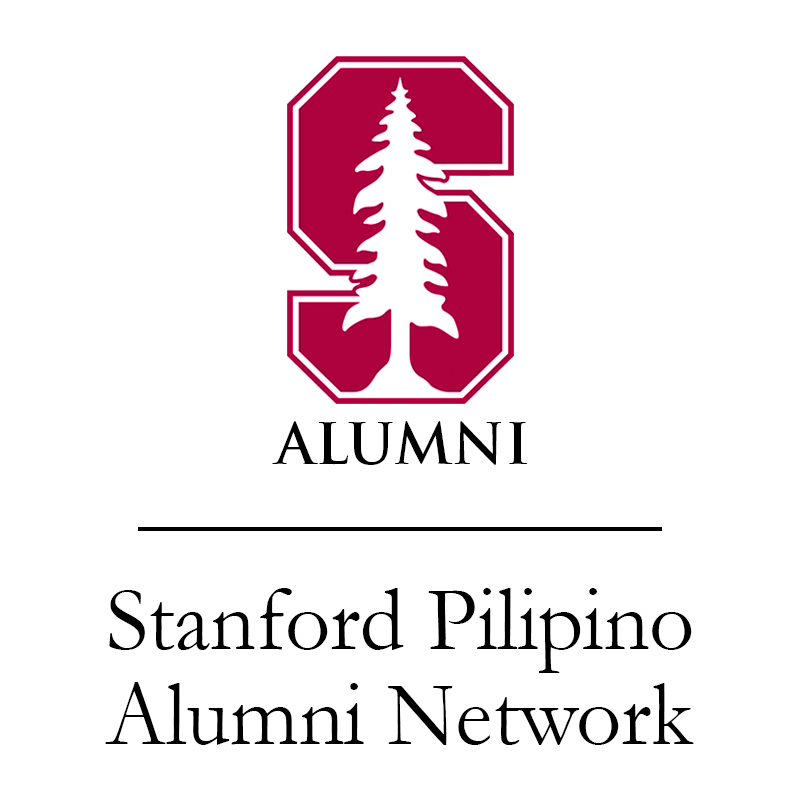
<style>
.page{position:relative;width:800px;height:800px;background:#ffffff}
.page>*{position:absolute;margin:0}
.t1{font:55.7px "TrajanPro-Bold";color:#000000}
.t2{font:93.8px/94.9px "Garamond";color:#000000;scale:0.95 1}
</style>
<div class="page">
<p class="t1" style="left:272px;top:421px;width:256px;height:44px">ALUMNI</p>
<p class="t2" style="left:105px;top:588px;width:589px;height:157px">Stanford Pilipino<br>Alumni Network</p>
</div>
